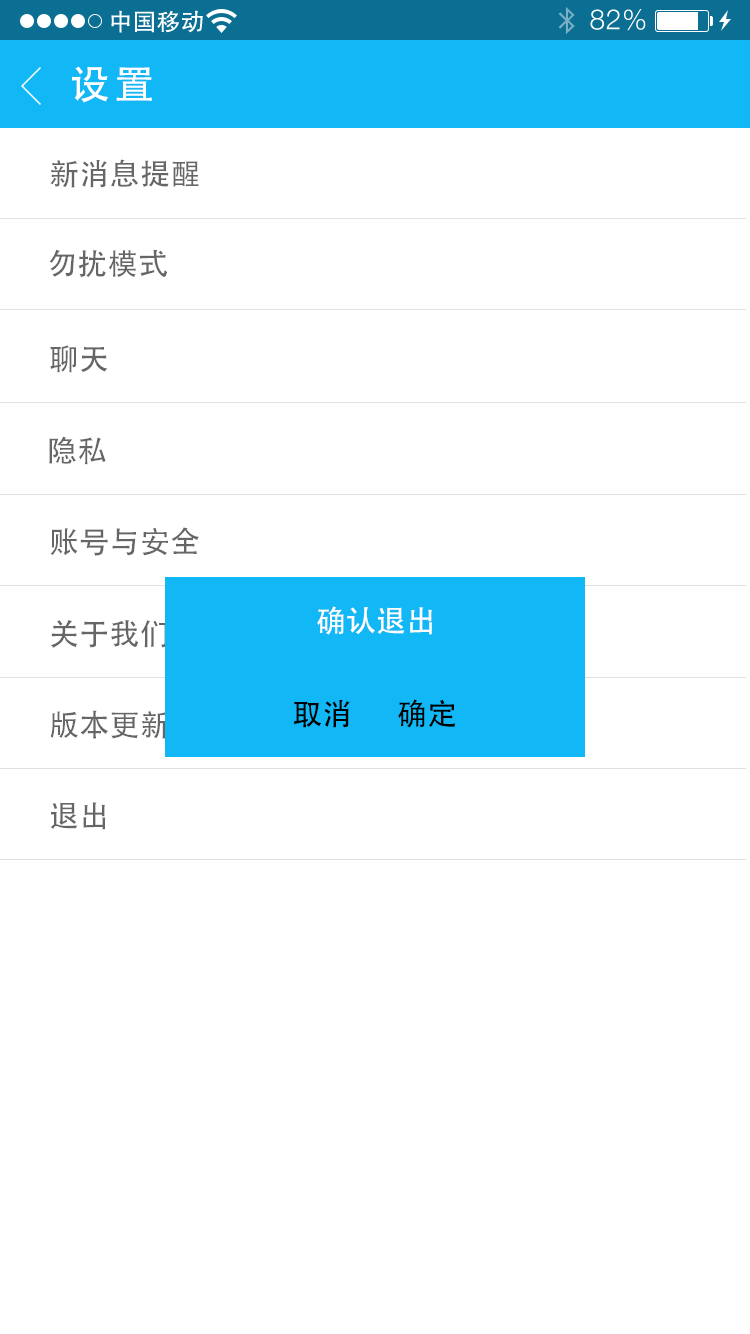
<style>
.page{position:relative;width:750px;height:1334px;background:#ffffff}
.page>*{position:absolute;margin:0}
.t1{font:40px "AdobeHeitiStd-Regular";letter-spacing:0.104em;color:#ffffff}
.t2{font:30px "AdobeHeitiStd-Regular";letter-spacing:0.01em;color:#666666}
.t3{font:30px "AdobeHeitiStd-Regular";color:#ffffff}
.t4{font:30px "AdobeHeitiStd-Regular";color:#010101}
.t5{font:30px "AdobeHeitiStd-Regular";color:#000000}
</style>
<div class="page">
<p class="t1" style="left:72px;top:66px;width:80px;height:37px">设置</p>
<p class="t2" style="left:50px;top:159px;width:149px;height:29px">新消息提醒</p>
<p class="t2" style="left:49px;top:249px;width:119px;height:29px">勿扰模式</p>
<p class="t2" style="left:50px;top:345px;width:58px;height:28px">聊天</p>
<p class="t2" style="left:49px;top:436px;width:57px;height:29px">隐私</p>
<p class="t2" style="left:50px;top:527px;width:149px;height:29px">账号与安全</p>
<p class="t3" style="left:317px;top:606px;width:116px;height:29px">确认退出</p>
<p class="t2" style="left:50px;top:619px;width:117px;height:29px">关于我们</p>
<p class="t4" style="left:293px;top:700px;width:57px;height:28px">取消</p>
<p class="t5" style="left:398px;top:699px;width:58px;height:29px">确定</p>
<p class="t2" style="left:50px;top:710px;width:119px;height:29px">版本更新</p>
<p class="t2" style="left:50px;top:802px;width:56px;height:28px">退出</p>
</div>
